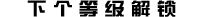
<style>
.page{position:relative;width:203px;height:17px;background:#ffffff}
.page>*{position:absolute;margin:0}
.t1{font:18px "JZhongYi";letter-spacing:0.3em;color:#000000;scale:1.11 1}
</style>
<div class="page">
<p class="t1" style="left:27px;top:0px;width:149px;height:17px">下个等级解锁</p>
</div>
